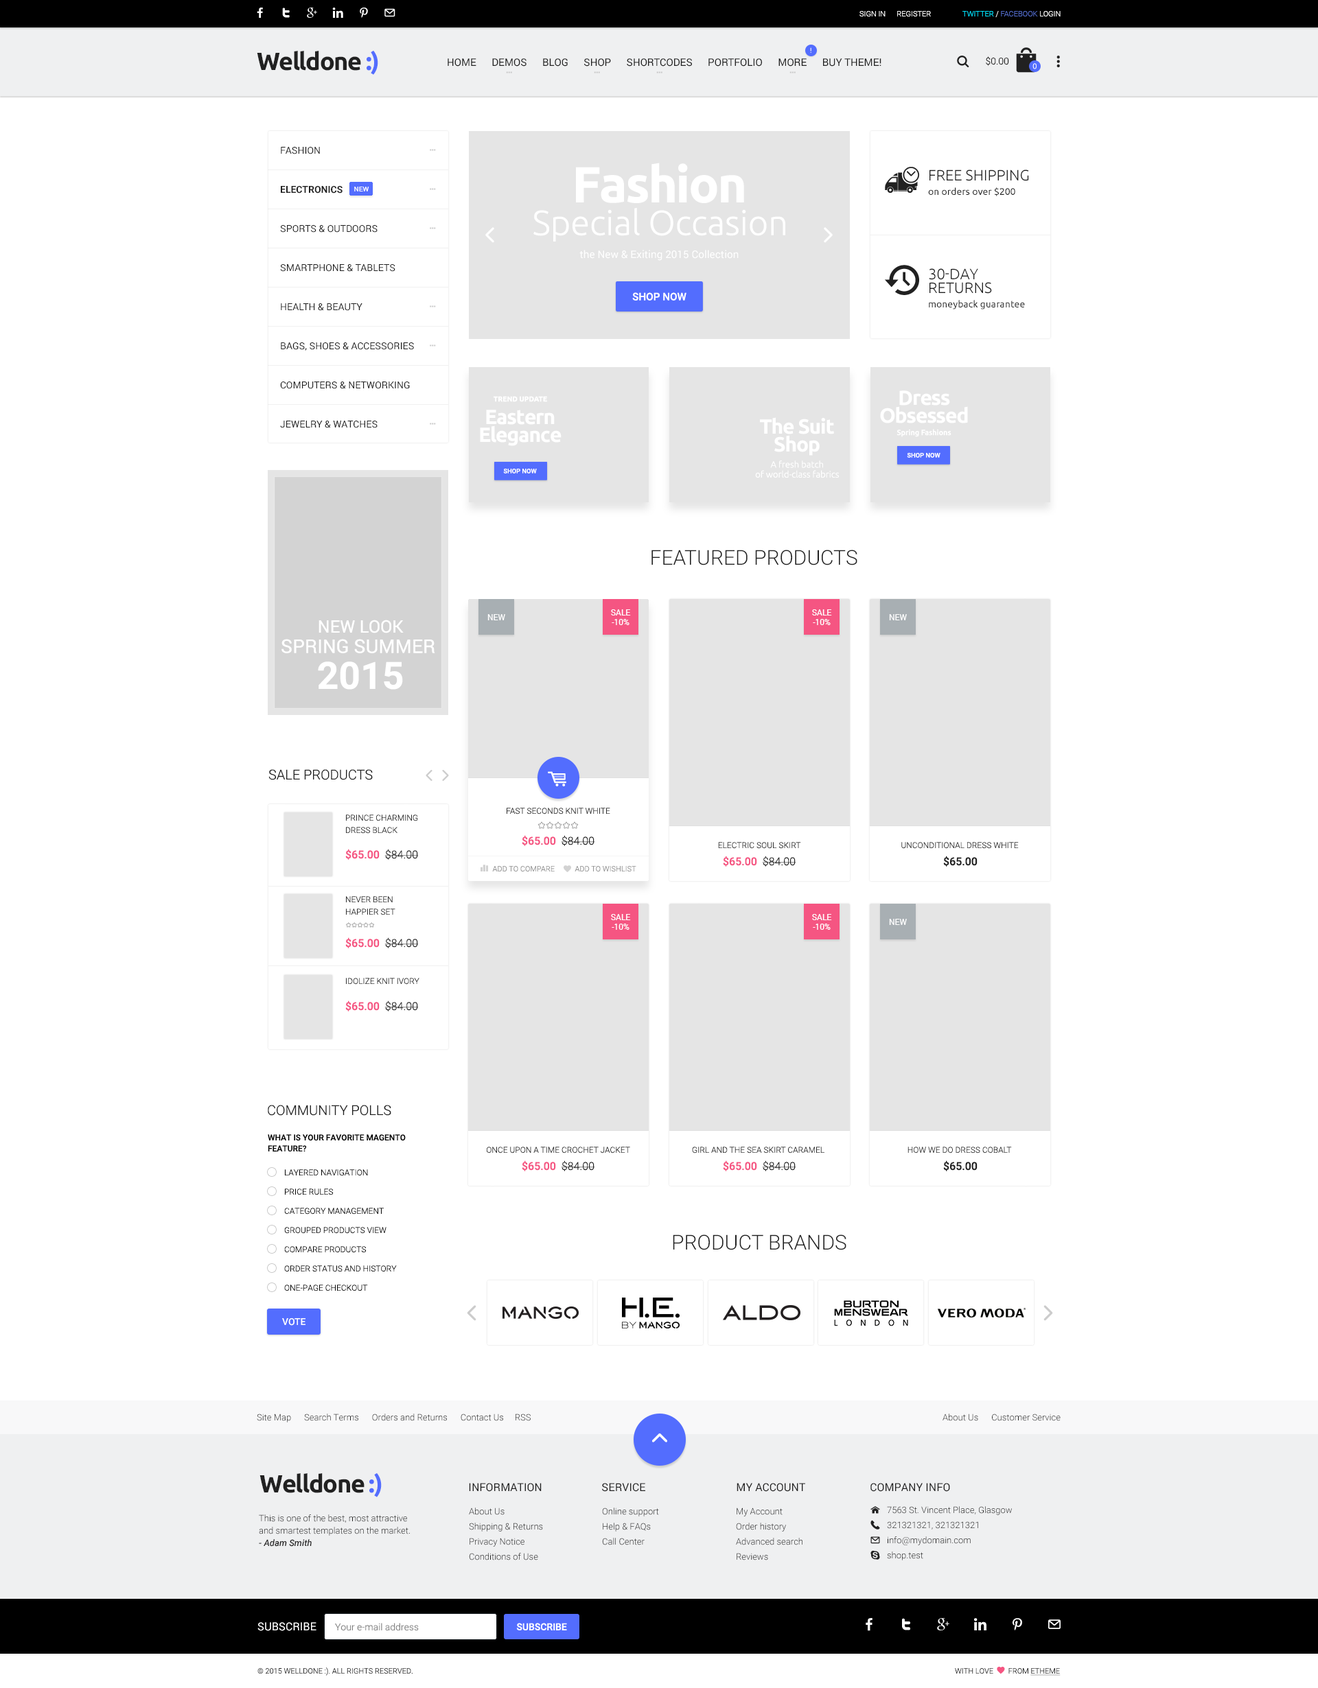
<style>
.page{position:relative;width:1318px;height:1688px;background:#ffffff}
.page>*{position:absolute;margin:0}
.t1{font:7.5px "Roboto-Light";color:#ffffff}
.t2{font:7.5px "Roboto-Light";color:#526ac4}
.t3{font:7.5px "Roboto-Light";color:#00e4ff}
.t4{font:24.7px "Ubuntu-Bold";letter-spacing:-0.04em;color:#212121}
.t5{font:24.7px "Ubuntu-Bold";letter-spacing:-0.04em;color:#536dfe}
.t6{font:6.9px "Roboto-Regular"}
.t7{font:10.3px "Roboto-Regular";color:#212121}
.t8{font:9.6px "Roboto-Light";color:#212121}
.t9{font:9.6px/39.1px "Roboto-Regular";color:#212121;text-transform:uppercase}
.t10{font:9.6px/39.1px "Roboto-Bold";color:#212121;text-transform:uppercase}
.t11{font:50.8px "Ubuntu-Bold";letter-spacing:-0.04em;color:#ffffff}
.t12{font:9.6px/14.7px "Ubuntu";color:#212121}
.t13{font:15.1px/13.7px "Ubuntu-Light";color:#212121;text-transform:uppercase}
.t14{font:6.9px "Roboto-Regular";color:#ffffff;text-transform:uppercase}
.t15{font:34.8px "Ubuntu-Light";color:#ffffff}
.t16{font:10.5px "Roboto-Regular";color:#ffffff}
.t17{font:15.1px "Ubuntu-Light";color:#212121;text-transform:uppercase}
.t18{font:10.5px "Roboto-Medium";color:#ffffff;text-transform:uppercase}
.t19{font:7.1px "Ubuntu-Bold";color:#ffffff}
.t20{font:20.6px/17.8px "Ubuntu-Bold";letter-spacing:-0.04em;color:#ffffff}
.t21{font:7.5px "Ubuntu-Medium";color:#ffffff}
.t22{font:9px/9.9px "Ubuntu-Light";color:#ffffff}
.t23{font:6.4px "Roboto-Medium";color:#ffffff;text-transform:uppercase}
.t24{font:20.6px "Roboto-Light";color:#212121;text-transform:uppercase}
.t25{font:8.2px "Roboto-Regular";color:#ffffff;text-transform:uppercase}
.t26{font:8.2px/9.6px "Roboto-Regular";color:#ffffff;text-transform:uppercase}
.t27{font:18.9px/20.3px "Roboto-Regular";color:#ffffff;text-transform:uppercase}
.t28{font:17.1px/17px "Roboto-Regular";color:#ffffff;text-transform:uppercase}
.t29{font:37.7px/35.9px "Roboto-Bold";color:#ffffff;text-transform:uppercase}
.t30{font:13.7px "Roboto-Light";color:#212121;text-transform:uppercase}
.t31{font:8.2px "Roboto-Light";color:#2b2b2b;text-transform:uppercase}
.t32{font:8.2px/12.4px "Roboto-Light";color:#2b2b2b;text-transform:uppercase}
.t33{font:11px "Roboto-Medium";color:#f55582}
.t34{font:11px "Roboto-Light";color:#212121}
.t35{font:11px "Roboto-Medium";color:#212121}
.t36{font:7.5px "Roboto-Light";color:#919191;text-transform:uppercase}
.t37{font:8.2px/12.4px "Roboto-Medium";color:#000000;text-transform:uppercase}
.t38{font:8.2px/11px "Roboto-Medium";color:#000000;text-transform:uppercase}
.t39{font:8.2px/19.2px "Roboto-Light";color:#000000;text-transform:uppercase}
.t40{font:9.6px "Roboto-Medium";color:#ffffff;text-transform:uppercase}
.t41{font:8.9px "Roboto-Light";color:#212121}
.t42{font:11px "Roboto-Regular";color:#212121;text-transform:uppercase}
.t43{font:8.9px/12.4px "Roboto-Light";color:#212121}
.t44{font:8.9px/12.4px "Roboto-MediumItalic";color:#212121}
.t45{font:8.9px/15.1px "Roboto-Light";color:#212121}
.t46{font:8.9px/15.1px "Roboto-Light"}
.t47{font:11px "Roboto-Regular";color:#ffffff;text-transform:uppercase}
.t48{font:9.6px "Roboto-Light";color:#848484}
.t49{font:7.5px "Roboto-Light";color:#2b2b2b;text-transform:uppercase}
</style>
<div class="page">
<p class="t1" style="left:859px;top:11px;width:72px;height:5px">SIGN IN      REGISTER</p>
<p class="t2" style="left:962px;top:11px;width:98px;height:6px"><span class="t3">TWITTER </span><span class="t1">/ </span>FACEBOOK <span class="t1">LOGIN</span></p>
<p class="t4" style="left:257px;top:50px;width:121px;height:25px">Welldone<span class="t5"> :)</span></p>
<p class="t6" style="left:810px;top:47px;width:1px;height:6px">!</p>
<p class="t7" style="left:447px;top:58px;width:434px;height:9px">HOME      DEMOS      BLOG      SHOP      SHORTCODES      PORTFOLIO      MORE      BUY THEME!</p>
<p class="t8" style="left:985px;top:56px;width:24px;height:10px">$0.00</p>
<p class="t1" style="left:1032px;top:63px;width:4px;height:6px">0</p>
<p class="t9" style="left:280px;top:147px;width:134px;height:281px">Fashion<br><span class="t10">Electronics<br></span>Sports &amp; Outdoors<br>Smartphone &amp; Tablets<br>Health &amp; Beauty<br>Bags, Shoes &amp; Accessories<br>Computers &amp; Networking<br>Jewelry &amp; Watches</p>
<p class="t11" style="left:576px;top:163px;width:168px;height:40px">Fashion</p>
<p class="t12" style="left:928px;top:169px;width:101px;height:27px"><span class="t13">Free Shipping <br></span>on orders over $200</p>
<p class="t14" style="left:354px;top:187px;width:15px;height:4px">new</p>
<p class="t15" style="left:533px;top:208px;width:252px;height:34px">Special Occasion</p>
<p class="t16" style="left:579px;top:250px;width:159px;height:11px">the New &amp; Exiting 2015 Collection</p>
<p class="t12" style="left:928px;top:268px;width:97px;height:41px"><span class="t17">30-day <br></span><span class="t13">returns<br></span>moneyback guarantee</p>
<p class="t18" style="left:632px;top:292px;width:54px;height:9px">SHOP NOW</p>
<p class="t19" style="left:493px;top:396px;width:54px;height:6px">TREND UPDATE</p>
<p class="t20" style="left:880px;top:390px;width:88px;height:33px;text-align:center">Dress<br>Obsessed</p>
<p class="t20" style="left:480px;top:410px;width:81px;height:36px;text-align:center">Eastern<br>Elegance</p>
<p class="t20" style="left:760px;top:417px;width:74px;height:39px;text-align:center">The Suit<br>Shop</p>
<p class="t21" style="left:896px;top:429px;width:55px;height:8px">Spring Fashions</p>
<p class="t22" style="left:755px;top:460px;width:84px;height:18px;text-align:center">A fresh batch<br>of world-class fabrics</p>
<p class="t23" style="left:907px;top:453px;width:33px;height:5px">SHOP NOW</p>
<p class="t23" style="left:503px;top:469px;width:34px;height:4px">SHOP NOW</p>
<p class="t24" style="left:651px;top:550px;width:206px;height:15px">featured products</p>
<p class="t25" style="left:487px;top:614px;width:18px;height:6px">new</p>
<p class="t26" style="left:611px;top:609px;width:20px;height:16px;text-align:center">sale<br>-10%</p>
<p class="t26" style="left:812px;top:609px;width:20px;height:16px;text-align:center">sale<br>-10%</p>
<p class="t25" style="left:889px;top:614px;width:18px;height:6px">new</p>
<p class="t27" style="left:281px;top:620px;width:154px;height:70px;text-align:center"><span class="t28">NEW LOOK<br></span>SPRING Summer <br><span class="t29">2015</span></p>
<p class="t30" style="left:268px;top:769px;width:105px;height:11px">Sale Products</p>
<p class="t31" style="left:506px;top:808px;width:104px;height:7px">Fast Seconds Knit White</p>
<p class="t32" style="left:346px;top:815px;width:72px;height:19px">Prince Charming<br>Dress Black</p>
<p class="t33" style="left:522px;top:835px;width:73px;height:11px">$65.00  <span class="t34">$84.00</span></p>
<p class="t31" style="left:718px;top:842px;width:83px;height:7px">Electric Soul Skirt</p>
<p class="t31" style="left:901px;top:842px;width:117px;height:7px">Unconditional Dress White</p>
<p class="t33" style="left:345px;top:849px;width:74px;height:11px">$65.00  <span class="t34">$84.00</span></p>
<p class="t33" style="left:723px;top:856px;width:73px;height:11px">$65.00  <span class="t34">$84.00</span></p>
<p class="t35" style="left:943px;top:856px;width:34px;height:11px">$65.00</p>
<p class="t36" style="left:492px;top:866px;width:144px;height:6px">Add to compare           add to wishlist</p>
<p class="t32" style="left:346px;top:896px;width:49px;height:19px">Never Been <br>Happier Set</p>
<p class="t26" style="left:611px;top:914px;width:20px;height:16px;text-align:center">sale<br>-10%</p>
<p class="t26" style="left:812px;top:914px;width:20px;height:16px;text-align:center">sale<br>-10%</p>
<p class="t25" style="left:889px;top:919px;width:18px;height:6px">new</p>
<p class="t33" style="left:345px;top:937px;width:74px;height:11px">$65.00  <span class="t34">$84.00</span></p>
<p class="t31" style="left:346px;top:978px;width:73px;height:7px">Idolize Knit Ivory</p>
<p class="t33" style="left:345px;top:1001px;width:74px;height:11px">$65.00  <span class="t34">$84.00</span></p>
<p class="t30" style="left:268px;top:1105px;width:123px;height:11px">Community Polls</p>
<p class="t37" style="left:268px;top:1134px;width:138px;height:18px">What is your favorite <span class="t38">Magento <br>feature?</span></p>
<p class="t31" style="left:487px;top:1147px;width:143px;height:7px">Once Upon A Time Crochet Jacket</p>
<p class="t31" style="left:692px;top:1147px;width:132px;height:7px">Girl And The Sea Skirt Caramel</p>
<p class="t31" style="left:907px;top:1147px;width:105px;height:7px">How We Do Dress Cobalt</p>
<p class="t39" style="left:284px;top:1169px;width:113px;height:122px">Layered Navigation<br>Price Rules<br>Category Management<br>Grouped products view<br>Compare Products<br>Order status and history<br>One-page checkout</p>
<p class="t33" style="left:522px;top:1160px;width:73px;height:11px">$65.00  <span class="t34">$84.00</span></p>
<p class="t33" style="left:723px;top:1160px;width:73px;height:11px">$65.00  <span class="t34">$84.00</span></p>
<p class="t35" style="left:943px;top:1160px;width:34px;height:11px">$65.00</p>
<p class="t24" style="left:673px;top:1235px;width:173px;height:15px">PRODUCT BRANDS</p>
<p class="t40" style="left:282px;top:1318px;width:23px;height:8px">Vote</p>
<p class="t41" style="left:257px;top:1414px;width:273px;height:9px">Site Map      Search Terms      Orders and Returns      Contact Us     RSS</p>
<p class="t41" style="left:942px;top:1414px;width:118px;height:7px">About Us      Customer Service</p>
<p class="t4" style="left:259px;top:1473px;width:123px;height:24px">Welldone <span class="t5">:)</span></p>
<p class="t42" style="left:469px;top:1483px;width:72px;height:9px">Information</p>
<p class="t42" style="left:602px;top:1483px;width:43px;height:9px">service</p>
<p class="t42" style="left:736px;top:1483px;width:69px;height:9px">My account</p>
<p class="t42" style="left:870px;top:1483px;width:80px;height:9px">Company Info</p>
<p class="t43" style="left:259px;top:1515px;width:151px;height:32px">This is one of the best, most attractive and smartest templates on the market. <br><span class="t44">- Adam Smith</span></p>
<p class="t45" style="left:469px;top:1508px;width:74px;height:52px">About Us<br>Shipping &amp; Returns<br>Privacy Notice<br>Conditions of Use</p>
<p class="t46" style="left:602px;top:1508px;width:57px;height:37px">Online support<br>Help &amp; FAQs<br>Call Center</p>
<p class="t45" style="left:736px;top:1508px;width:66px;height:52px">My Account<br>Order history<br>Advanced search<br>Reviews</p>
<p class="t45" style="left:887px;top:1506px;width:125px;height:54px">7563 St. Vincent Place, Glasgow<br>321321321, 321321321<br>info@mydomain.com<br>shop.test</p>
<p class="t47" style="left:257px;top:1622px;width:59px;height:9px">Subscribe</p>
<p class="t48" style="left:335px;top:1623px;width:84px;height:8px">Your e-mail address</p>
<p class="t40" style="left:516px;top:1623px;width:51px;height:7px">SUBSCRIBE</p>
<p class="t49" style="left:257px;top:1668px;width:155px;height:8px">© 2015 Welldone :). All Rights Reserved.</p>
</div>
